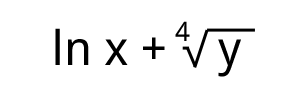
<style>
.page{position:relative;width:300px;height:90px;background:#ffffff}
.page>*{position:absolute;margin:0}
.t1{font:47.6px "DroidSans";color:#000000}
.t2{font:27px "DroidSans";color:#000000}
</style>
<div class="page">
<p class="t1" style="left:55px;top:28px;width:110px;height:37px">ln x +</p>
<p class="t2" style="left:175px;top:21px;width:15px;height:20px">4</p>
<p class="t1" style="left:218px;top:39px;width:23px;height:38px">y</p>
</div>
